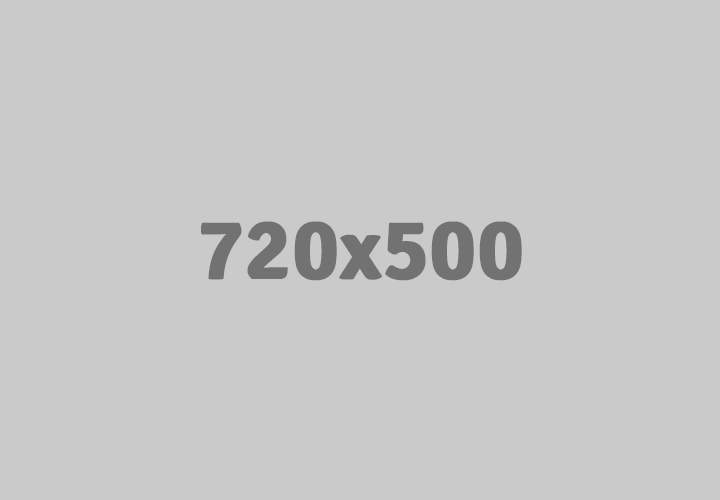
<style>
.page{position:relative;width:720px;height:500px;background:#cacaca}
.page>*{position:absolute;margin:0}
.t1{font:85.1px "SignikaNegative-Bold";color:#727272;font-weight:bold}
</style>
<div class="page">
<p class="t1" style="left:201px;top:221px;width:321px;height:60px">720x500</p>
</div>
